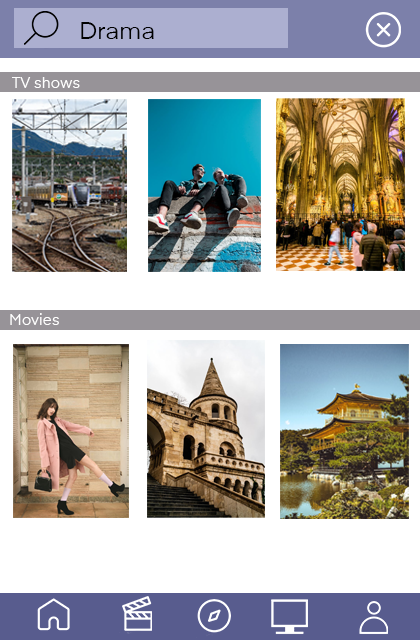
<style>
.page{position:relative;width:420px;height:640px;background:#ffffff}
.page>*{position:absolute;margin:0}
.t1{font:24px "Eina01-Regular";color:#000000}
.t2{font:15.2px "Eina01-Regular";color:#ffffff}
</style>
<div class="page">
<p class="t1" style="left:81px;top:22px;width:73px;height:17px">Drama</p>
<p class="t2" style="left:12px;top:77px;width:68px;height:11px">TV shows</p>
<p class="t2" style="left:10px;top:313px;width:49px;height:12px">Movies</p>
</div>
